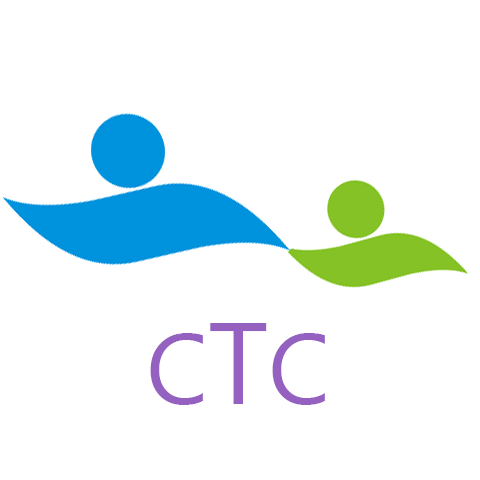
<style>
.page{position:relative;width:480px;height:480px;background:#ffffff}
.page>*{position:absolute;margin:0}
.t1{font:100px "LeelawadeeUI";color:#9561c1}
.t2{font:115px "LeelawadeeUI";color:#9561c1}
</style>
<div class="page">
<p class="t1" style="left:150px;top:323px;width:175px;height:82px">C<span class="t2">T</span>C</p>
</div>
